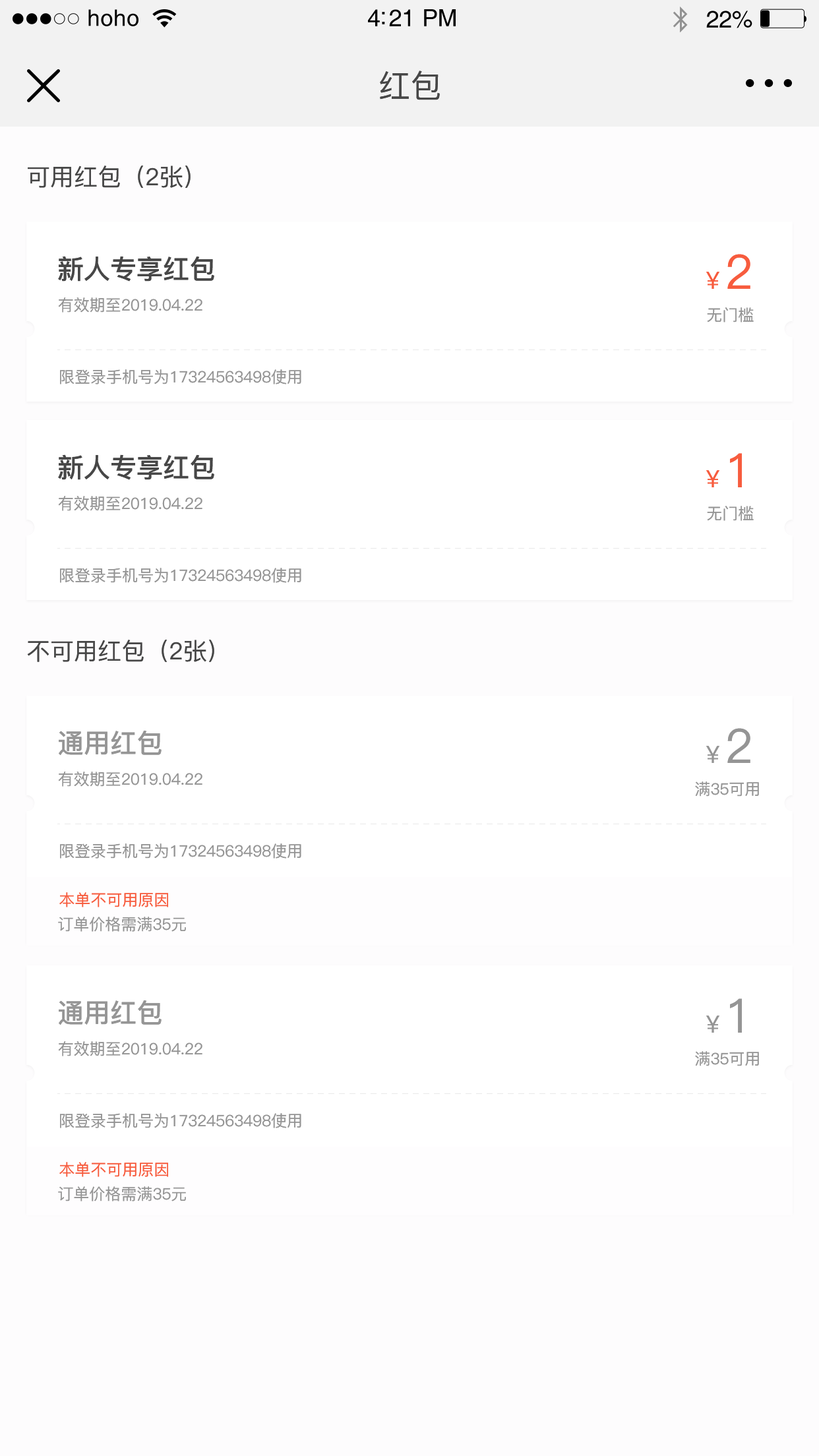
<style>
.page{position:relative;width:819px;height:1456px;background:#ffffff}
.page>*{position:absolute;margin:0}
.t1{font:22.8px "Helvetica";letter-spacing:0.02em;color:#000000}
.t2{font:23.8px "Helvetica";letter-spacing:-0.02em;color:#000000}
.t3{font:31.7px "PingFang-SC-Medium";color:#474747}
.t4{font:23.7px "PingFang-SC-Medium";color:#474747}
.t5{font:26.4px "PingFang-SC-Bold";color:#474747}
.t6{font:23.7px "PingFang-SC-Medium";color:#f75c3e}
.t7{font:47.5px "PingFang-SC-Medium";color:#f75c3e}
.t8{font:15.8px "PingFang-SC-Medium";color:#959595}
.t9{font:26.4px "PingFang-SC-Bold";color:#959595}
.t10{font:23.7px "PingFang-SC-Medium";color:#959595}
.t11{font:47.5px "PingFang-SC-Medium";color:#959595}
.t12{font:15.8px "PingFang-SC-Medium";color:#f75c3e}
</style>
<div class="page">
<p class="t1" style="left:88px;top:9px;width:50px;height:17px">hoho</p>
<p class="t2" style="left:368px;top:9px;width:88px;height:17px">4:21 PM</p>
<p class="t2" style="left:706px;top:11px;width:46px;height:17px">22%</p>
<p class="t3" style="left:380px;top:71px;width:60px;height:29px">红包</p>
<p class="t4" style="left:28px;top:166px;width:163px;height:22px">可用红包（2张）</p>
<p class="t5" style="left:58px;top:256px;width:156px;height:26px">新人专享红包</p>
<p class="t6" style="left:706px;top:254px;width:44px;height:35px">￥<span class="t7">2</span></p>
<p class="t8" style="left:58px;top:297px;width:144px;height:16px">有效期至2019.04.22</p>
<p class="t8" style="left:707px;top:307px;width:47px;height:15px">无门槛</p>
<p class="t8" style="left:60px;top:369px;width:241px;height:15px">限登录手机号为17324563498使用</p>
<p class="t5" style="left:58px;top:454px;width:156px;height:26px">新人专享红包</p>
<p class="t6" style="left:706px;top:453px;width:36px;height:34px">￥<span class="t7">1</span></p>
<p class="t8" style="left:58px;top:496px;width:144px;height:15px">有效期至2019.04.22</p>
<p class="t8" style="left:707px;top:506px;width:47px;height:15px">无门槛</p>
<p class="t8" style="left:60px;top:568px;width:241px;height:15px">限登录手机号为17324563498使用</p>
<p class="t4" style="left:27px;top:640px;width:187px;height:22px">不可用红包（2张）</p>
<p class="t9" style="left:59px;top:730px;width:103px;height:26px">通用红包</p>
<p class="t10" style="left:706px;top:728px;width:44px;height:35px">￥<span class="t11">2</span></p>
<p class="t8" style="left:58px;top:772px;width:144px;height:15px">有效期至2019.04.22</p>
<p class="t8" style="left:695px;top:781px;width:64px;height:16px">满35可用</p>
<p class="t8" style="left:60px;top:843px;width:241px;height:16px">限登录手机号为17324563498使用</p>
<p class="t12" style="left:59px;top:892px;width:109px;height:15px">本单不可用原因</p>
<p class="t8" style="left:58px;top:917px;width:128px;height:15px">订单价格需满35元</p>
<p class="t9" style="left:59px;top:1000px;width:103px;height:25px">通用红包</p>
<p class="t10" style="left:706px;top:998px;width:36px;height:35px">￥<span class="t11">1</span></p>
<p class="t8" style="left:58px;top:1041px;width:144px;height:15px">有效期至2019.04.22</p>
<p class="t8" style="left:695px;top:1051px;width:64px;height:15px">满35可用</p>
<p class="t8" style="left:60px;top:1113px;width:241px;height:15px">限登录手机号为17324563498使用</p>
<p class="t12" style="left:59px;top:1162px;width:109px;height:15px">本单不可用原因</p>
<p class="t8" style="left:58px;top:1186px;width:128px;height:15px">订单价格需满35元</p>
</div>
